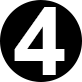
<style>
.page{position:relative;width:82px;height:82px;background:#000000}
.page>*{position:absolute;margin:0}
.t1{font:95.8px "Arial-BoldMT";color:#ffffff}
</style>
<div class="page">
<p class="t1" style="left:14px;top:7px;width:51px;height:68px">4</p>
</div>
